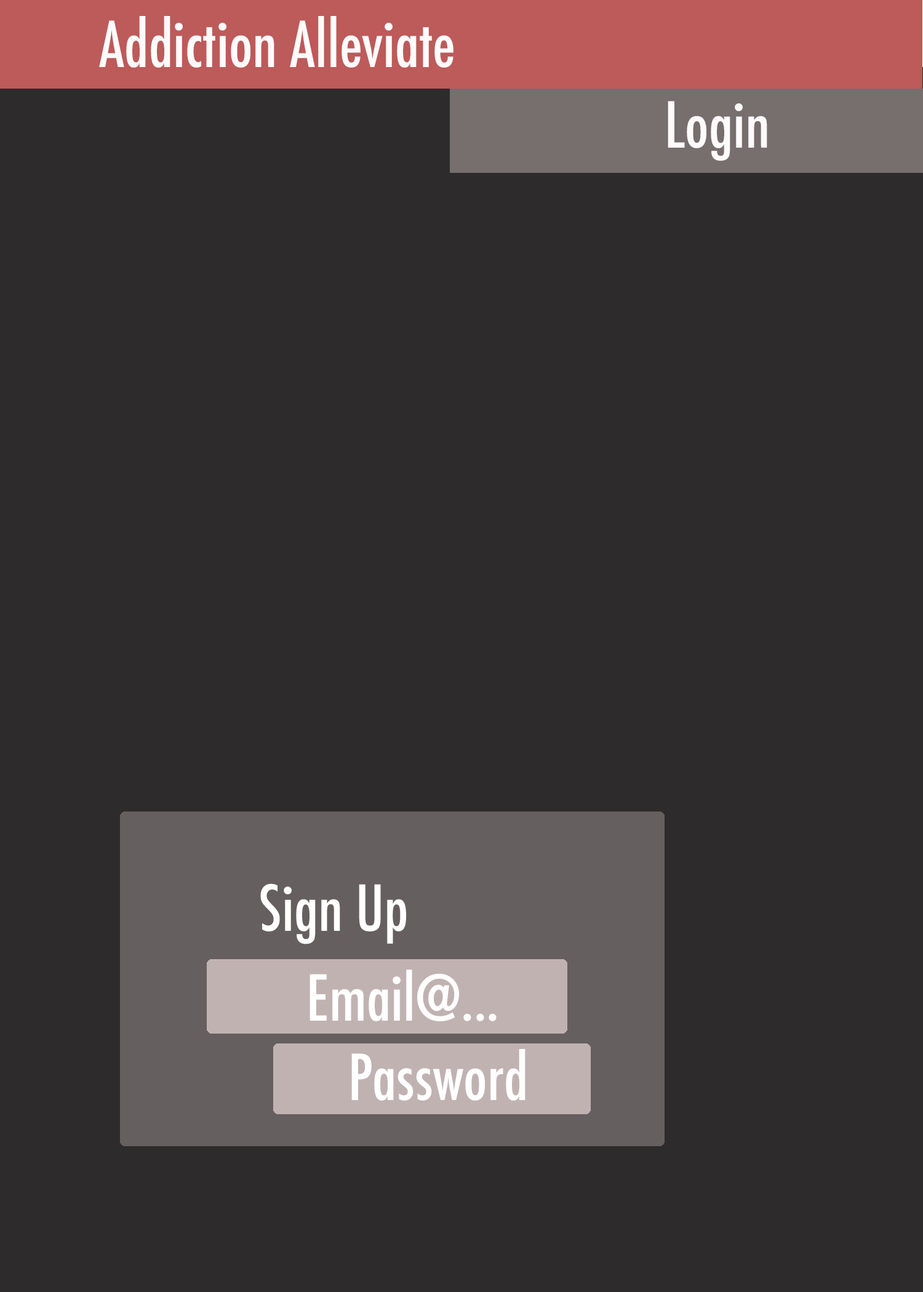
<style>
.page{position:relative;width:923px;height:1292px;background:#2d2b2b}
.page>*{position:absolute;margin:0}
.t1{font:61.5px "Futura-CondensedMedium";color:#fffbfb}
.t2{font:61.5px "Futura-CondensedMedium";color:#ffffff}
</style>
<div class="page">
<p class="t1" style="left:99px;top:16px;width:354px;height:52px">Addiction Alleviate</p>
<p class="t1" style="left:668px;top:101px;width:99px;height:60px">Login</p>
<p class="t2" style="left:309px;top:970px;width:188px;height:51px">Email@...</p>
<p class="t2" style="left:351px;top:1049px;width:174px;height:52px">Password</p>
</div>
